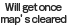
<style>
.page{position:relative;width:67px;height:28px;background:#ffffff}
.page>*{position:absolute;margin:0}
.t1{font:10px/12px "GothicMB101Pro-Medium";letter-spacing:-0.07em;color:#2a2a2a;scale:0.9 1}
</style>
<div class="page">
<p class="t1" style="left:1px;top:3px;width:66px;height:22px;text-align:center">Will get once<br>map’s cleared</p>
</div>
